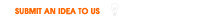
<style>
.page{position:relative;width:200px;height:20px;background:#ffffff}
.page>*{position:absolute;margin:0}
.t1{font:8px "Atlanta-Demi";color:#ff6600}
</style>
<div class="page">
<p class="t1" style="left:15px;top:7px;width:85px;height:8px">SUBMIT AN IDEA TO US</p>
</div>
